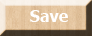
<style>
.page{position:relative;width:92px;height:36px}
.page>*{position:absolute;margin:0}
.t1{font:16px "Tahoma-Bold";color:#ffffff}
</style>
<div class="page">
<p class="t1" style="left:30px;top:10px;width:38px;height:12px">Save</p>
</div>
